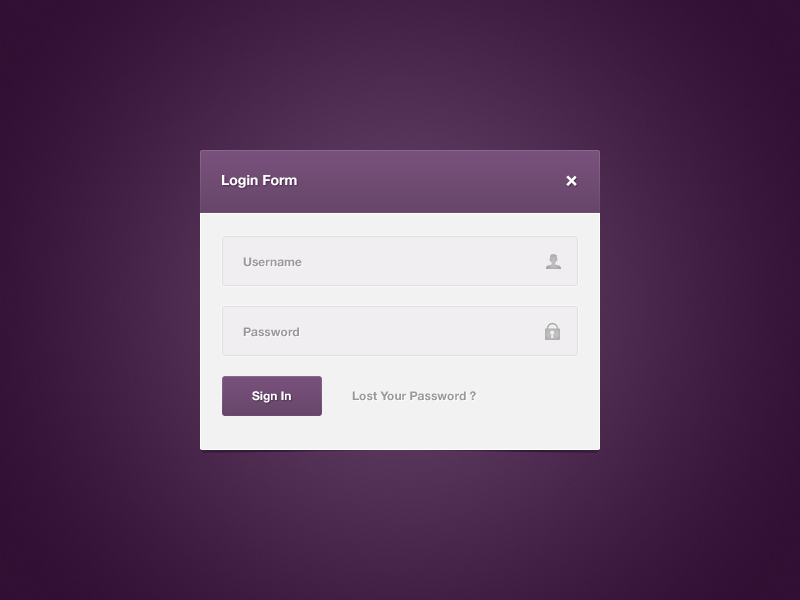
<style>
.page{position:relative;width:800px;height:600px}
.page>*{position:absolute;margin:0}
.t1{font:14px "HelveticaNeue-Bold";color:#ffffff}
.t2{font:24px "HelveticaNeue-Bold";color:#ffffff}
.t3{font:12px "HelveticaNeue-Bold";color:#999999}
.t4{font:12px "HelveticaNeue-Bold";color:#ffffff}
</style>
<div class="page">
<p class="t1" style="left:222px;top:175px;width:75px;height:13px">Login Form</p>
<p class="t2" style="left:566px;top:175px;width:11px;height:11px;rotate:45deg">+</p>
<p class="t3" style="left:243px;top:257px;width:59px;height:10px">Username</p>
<p class="t3" style="left:243px;top:327px;width:56px;height:10px">Password</p>
<p class="t4" style="left:252px;top:391px;width:39px;height:12px">Sign In</p>
<p class="t3" style="left:352px;top:391px;width:124px;height:10px">Lost Your Password ?</p>
</div>
